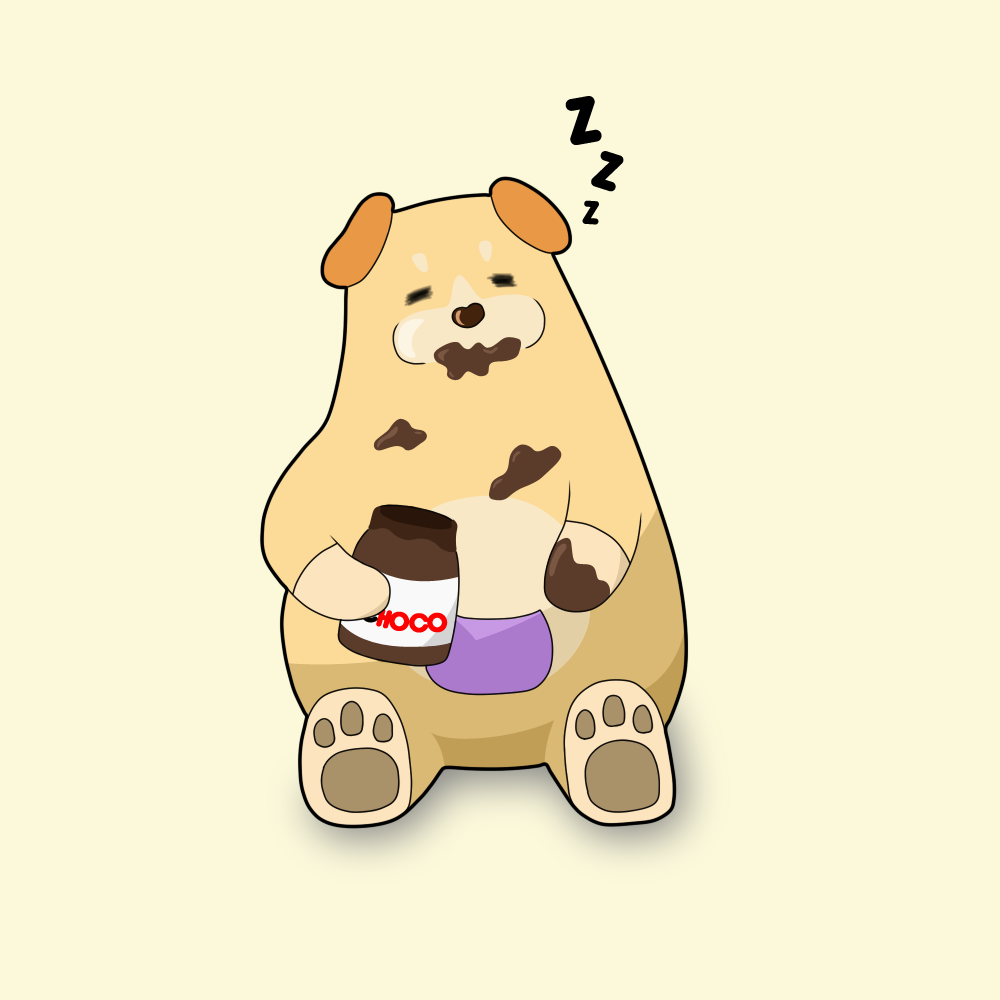
<style>
.page{position:relative;width:1000px;height:1000px;background:#fcf9db}
.page>*{position:absolute;margin:0}
.t1{font:24px "GaroaHackerClube-Bold";color:#ff0000;text-transform:uppercase;font-weight:bold}
.t2{font:24px "GaroaHackerClube-Bold";color:#000000;text-transform:uppercase;font-weight:bold}
</style>
<div class="page">
<p class="t1" style="left:360px;top:603px;width:88px;height:30px"><span class="t2">c</span>hoco</p>
</div>
